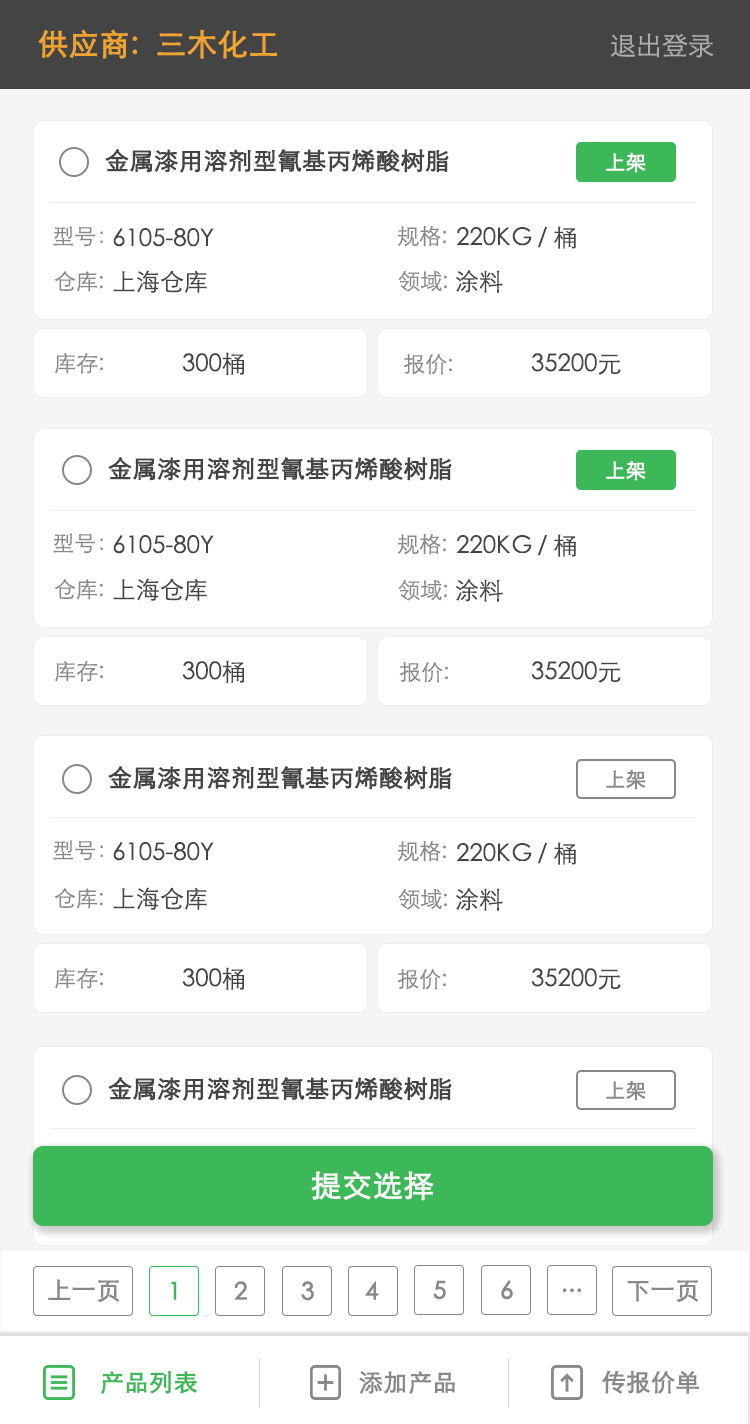
<style>
.page{position:relative;width:750px;height:1424px;background:#ffffff}
.page>*{position:absolute;margin:0}
.t1{font:30px "STXihei";color:#efa431;font-weight:bold}
.t2{font:26px "STXihei";color:#acacac}
.t3{font:24px "STXihei";color:#444444;font-weight:bold}
.t4{font:20px "STXihei";color:#ffffff;font-weight:bold}
.t5{font:22px "STXihei";color:#888888}
.t6{font:24px "STXihei";color:#444444}
.t7{font:20px "STXihei";color:#888888;font-weight:bold}
.t8{font:30px "STXihei";color:#f5f5f5;font-weight:bold}
.t9{font:24px "STXihei";color:#888888;font-weight:bold}
.t10{font:24px "STXihei";color:#3db858;font-weight:bold}
</style>
<div class="page">
<p class="t1" style="left:38px;top:29px;width:239px;height:30px">供应商:  三木化工</p>
<p class="t2" style="left:611px;top:33px;width:103px;height:25px">退出登录</p>
<p class="t3" style="left:105px;top:149px;width:344px;height:24px">金属漆用溶剂型氰基丙烯酸树脂</p>
<p class="t4" style="left:606px;top:152px;width:40px;height:21px">上架</p>
<p class="t5" style="left:53px;top:226px;width:50px;height:21px">型号：</p>
<p class="t6" style="left:113px;top:228px;width:101px;height:19px">6105-80Y</p>
<p class="t5" style="left:398px;top:226px;width:48px;height:21px">规格:</p>
<p class="t6" style="left:456px;top:226px;width:120px;height:23px">220KG / 桶</p>
<p class="t6" style="left:113px;top:270px;width:94px;height:23px">上海仓库</p>
<p class="t5" style="left:398px;top:270px;width:49px;height:22px">领域:</p>
<p class="t6" style="left:456px;top:270px;width:47px;height:23px">涂料</p>
<p class="t5" style="left:54px;top:271px;width:49px;height:21px">仓库:</p>
<p class="t5" style="left:55px;top:353px;width:48px;height:21px">库存:</p>
<p class="t6" style="left:182px;top:352px;width:63px;height:23px">300桶</p>
<p class="t6" style="left:531px;top:353px;width:90px;height:22px">35200元</p>
<p class="t5" style="left:403px;top:354px;width:49px;height:21px">报价:</p>
<p class="t3" style="left:108px;top:457px;width:344px;height:24px">金属漆用溶剂型氰基丙烯酸树脂</p>
<p class="t4" style="left:606px;top:460px;width:40px;height:21px">上架</p>
<p class="t5" style="left:53px;top:533px;width:50px;height:21px">型号：</p>
<p class="t5" style="left:398px;top:534px;width:48px;height:21px">规格:</p>
<p class="t6" style="left:456px;top:534px;width:120px;height:23px">220KG / 桶</p>
<p class="t6" style="left:113px;top:535px;width:101px;height:19px">6105-80Y</p>
<p class="t5" style="left:54px;top:579px;width:49px;height:21px">仓库:</p>
<p class="t6" style="left:113px;top:578px;width:94px;height:23px">上海仓库</p>
<p class="t5" style="left:398px;top:579px;width:49px;height:22px">领域:</p>
<p class="t6" style="left:456px;top:579px;width:47px;height:23px">涂料</p>
<p class="t5" style="left:55px;top:661px;width:48px;height:21px">库存:</p>
<p class="t6" style="left:182px;top:660px;width:63px;height:23px">300桶</p>
<p class="t5" style="left:399px;top:662px;width:49px;height:21px">报价:</p>
<p class="t6" style="left:531px;top:661px;width:90px;height:22px">35200元</p>
<p class="t3" style="left:108px;top:766px;width:344px;height:24px">金属漆用溶剂型氰基丙烯酸树脂</p>
<p class="t7" style="left:606px;top:769px;width:40px;height:21px">上架</p>
<p class="t5" style="left:53px;top:840px;width:50px;height:21px">型号：</p>
<p class="t6" style="left:113px;top:842px;width:101px;height:19px">6105-80Y</p>
<p class="t5" style="left:398px;top:841px;width:48px;height:21px">规格:</p>
<p class="t6" style="left:456px;top:842px;width:120px;height:23px">220KG / 桶</p>
<p class="t5" style="left:54px;top:888px;width:49px;height:21px">仓库:</p>
<p class="t6" style="left:113px;top:887px;width:94px;height:23px">上海仓库</p>
<p class="t5" style="left:398px;top:888px;width:49px;height:22px">领域:</p>
<p class="t6" style="left:456px;top:888px;width:47px;height:23px">涂料</p>
<p class="t5" style="left:55px;top:968px;width:48px;height:21px">库存:</p>
<p class="t6" style="left:182px;top:967px;width:63px;height:23px">300桶</p>
<p class="t5" style="left:397px;top:969px;width:49px;height:21px">报价:</p>
<p class="t6" style="left:531px;top:968px;width:90px;height:22px">35200元</p>
<p class="t3" style="left:108px;top:1077px;width:344px;height:24px">金属漆用溶剂型氰基丙烯酸树脂</p>
<p class="t7" style="left:606px;top:1080px;width:40px;height:21px">上架</p>
<p class="t8" style="left:311px;top:1171px;width:123px;height:30px">提交选择</p>
<p class="t9" style="left:48px;top:1279px;width:71px;height:23px">上一页</p>
<p class="t10" style="left:171px;top:1281px;width:6px;height:19px">1</p>
<p class="t9" style="left:234px;top:1281px;width:13px;height:19px">2</p>
<p class="t9" style="left:301px;top:1281px;width:13px;height:20px">3</p>
<p class="t9" style="left:365px;top:1281px;width:14px;height:19px">4</p>
<p class="t9" style="left:433px;top:1280px;width:13px;height:20px">5</p>
<p class="t9" style="left:501px;top:1280px;width:12px;height:20px">6</p>
<p class="t9" style="left:562px;top:1288px;width:20px;height:5px">...</p>
<p class="t9" style="left:627px;top:1280px;width:71px;height:22px">下一页</p>
<p class="t10" style="left:101px;top:1370px;width:96px;height:24px">产品列表</p>
<p class="t9" style="left:359px;top:1371px;width:96px;height:23px">添加产品</p>
<p class="t9" style="left:602px;top:1370px;width:97px;height:24px">传报价单</p>
</div>
